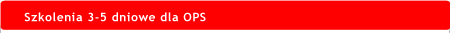
<style>
.page{position:relative;width:450px;height:33px;background:#ff0000}
.page>*{position:absolute;margin:0}
.t1{font:12px "TrebuchetMS-Bold";letter-spacing:0.05em;color:#ffffff}
</style>
<div class="page">
<p class="t1" style="left:24px;top:12px;width:182px;height:10px">Szkolenia 3-5 dniowe dla OPS</p>
</div>
